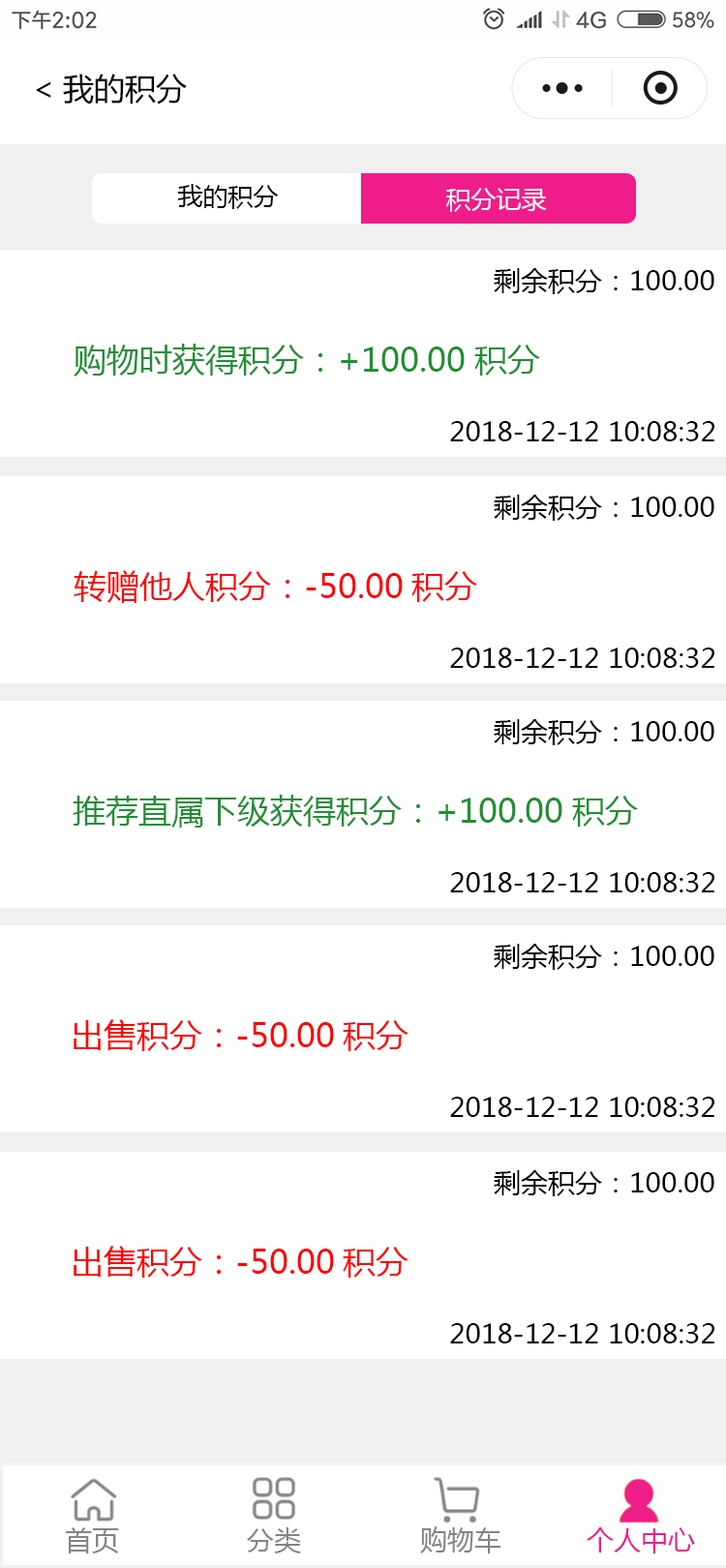
<style>
.page{position:relative;width:726px;height:1568px;background:#ffffff}
.page>*{position:absolute;margin:0}
.t1{font:31px "MicrosoftYaHei";color:#000000}
.t2{font:25.2px "MicrosoftYaHei";color:#000000}
.t3{font:25.2px "MicrosoftYaHei";color:#ffffff}
.t4{font:27.1px "MicrosoftYaHei";color:#000000}
.t5{font:32.9px "MicrosoftYaHei";color:#208f32}
.t6{font:32.9px "MicrosoftYaHei";color:#ff0101}
</style>
<div class="page">
<p class="t1" style="left:36px;top:74px;width:151px;height:31px">&lt;我的积分</p>
<p class="t2" style="left:177px;top:184px;width:102px;height:25px">我的积分</p>
<p class="t3" style="left:446px;top:188px;width:101px;height:24px">积分记录</p>
<p class="t4" style="left:494px;top:268px;width:220px;height:26px">剩余积分：100.00</p>
<p class="t5" style="left:74px;top:344px;width:466px;height:33px">购物时获得积分：+100.00积分</p>
<p class="t4" style="left:450px;top:421px;width:264px;height:20px">2018-12-12 10:08:32</p>
<p class="t4" style="left:494px;top:495px;width:220px;height:26px">剩余积分：100.00</p>
<p class="t6" style="left:74px;top:570px;width:403px;height:33px">转赠他人积分：-50.00积分</p>
<p class="t4" style="left:450px;top:648px;width:264px;height:20px">2018-12-12 10:08:32</p>
<p class="t4" style="left:494px;top:719px;width:220px;height:26px">剩余积分：100.00</p>
<p class="t5" style="left:73px;top:795px;width:565px;height:33px">推荐直属下级获得积分：+100.00积分</p>
<p class="t4" style="left:450px;top:872px;width:264px;height:20px">2018-12-12 10:08:32</p>
<p class="t4" style="left:494px;top:944px;width:220px;height:26px">剩余积分：100.00</p>
<p class="t6" style="left:74px;top:1019px;width:334px;height:32px">出售积分：-50.00积分</p>
<p class="t4" style="left:450px;top:1097px;width:264px;height:20px">2018-12-12 10:08:32</p>
<p class="t4" style="left:494px;top:1170px;width:220px;height:26px">剩余积分：100.00</p>
<p class="t6" style="left:74px;top:1246px;width:334px;height:32px">出售积分：-50.00积分</p>
<p class="t4" style="left:450px;top:1323px;width:264px;height:20px">2018-12-12 10:08:32</p>
</div>
